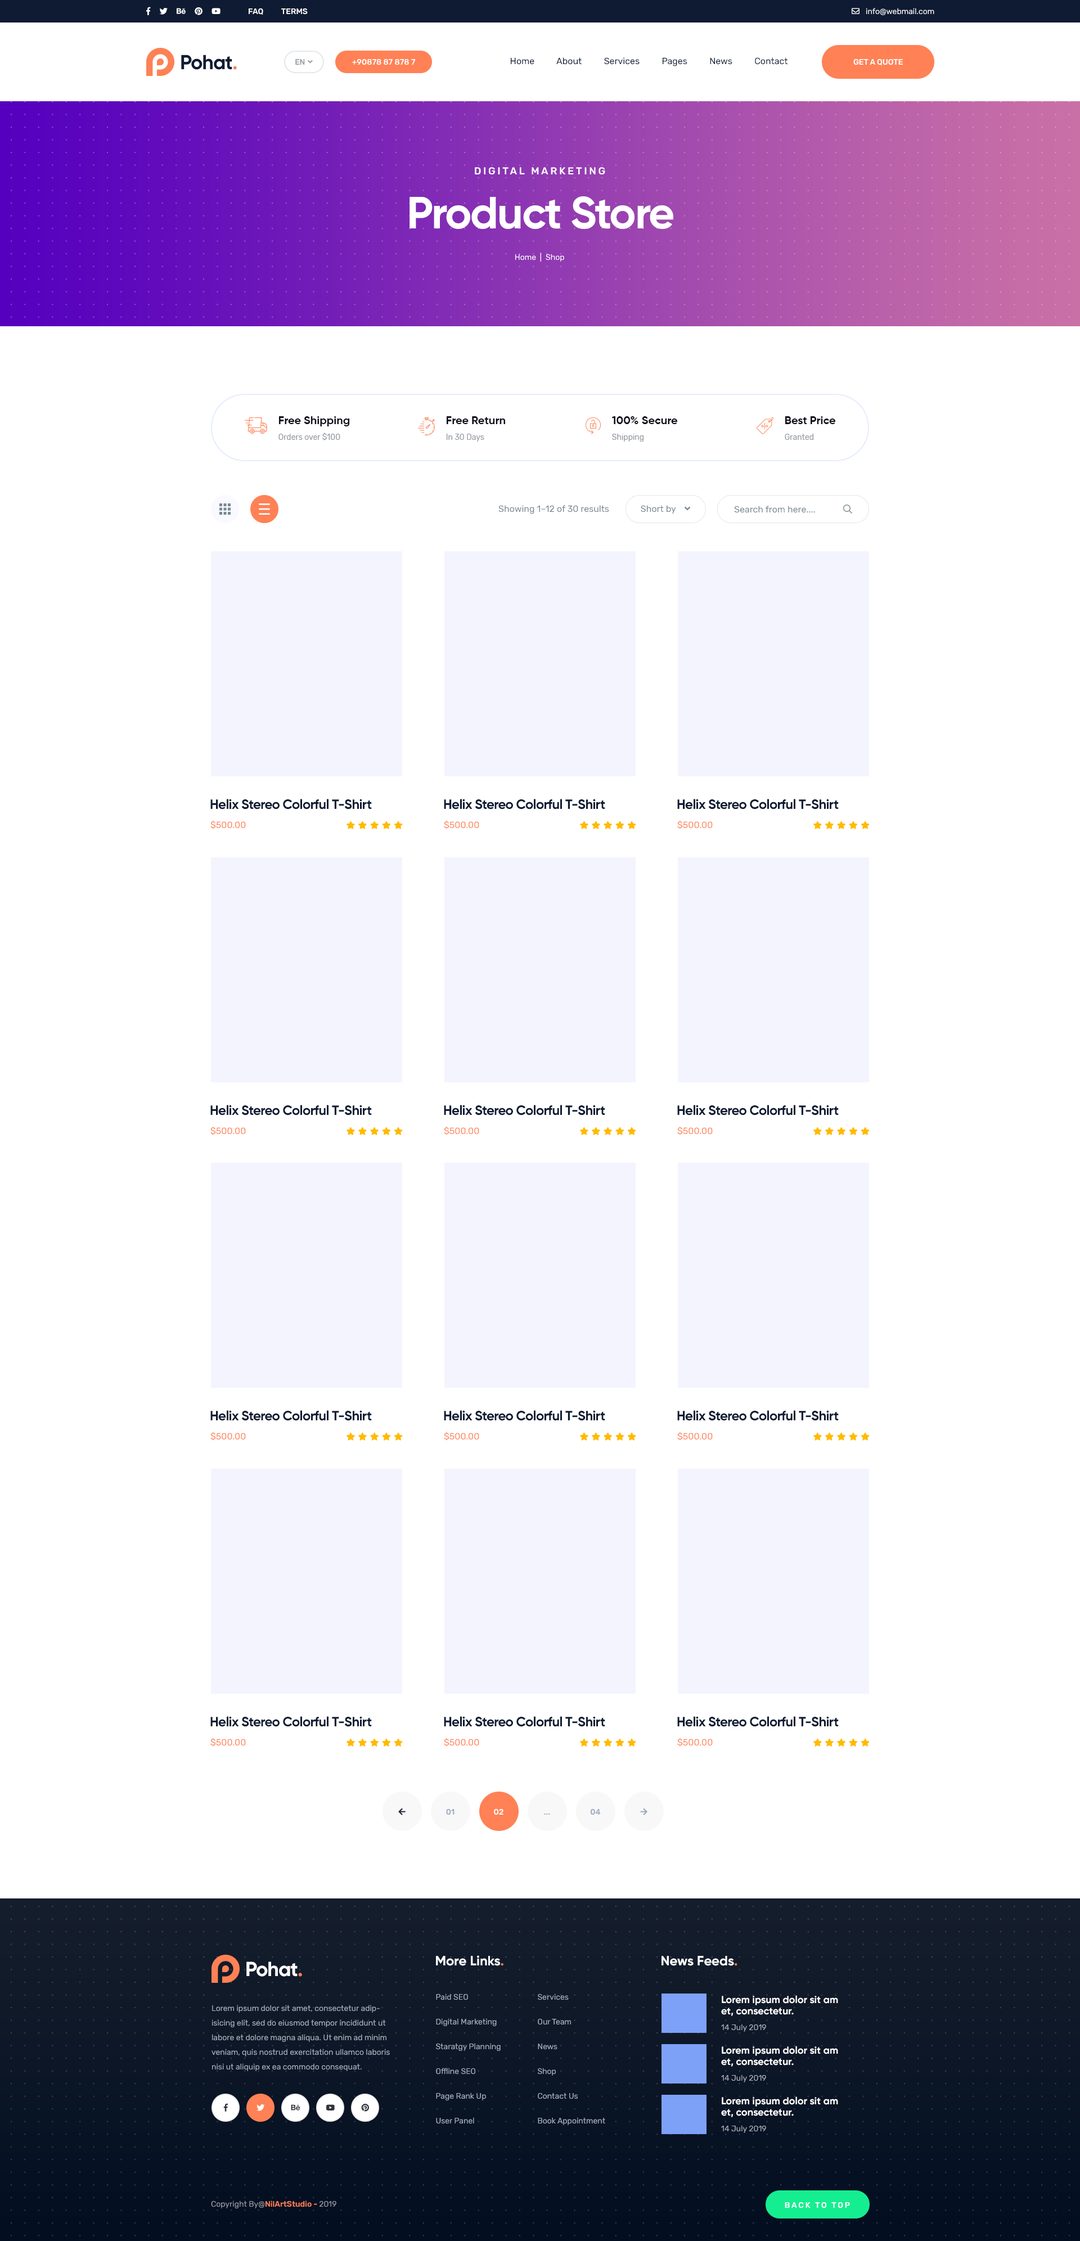
<style>
.page{position:relative;width:1080px;height:2241px;background:#ffffff}
.page>*{position:absolute;margin:0}
.t1{font:7.9px "Rubik-Medium";color:#ffffff;text-transform:uppercase}
.t2{font:7.9px "Rubik-Regular";color:#ffffff}
.t3{font:7.9px "FontAwesome5Pro-Regular";color:#ffffff}
.t4{font:20.2px "Gilroy-Bold";letter-spacing:-0.03em;color:#0e1b33}
.t5{font:20.2px "Gilroy-Bold";letter-spacing:-0.03em;color:#ff8156}
.t6{font:7.9px "Rubik-Medium";color:#ffffff}
.t7{font:9px "Rubik-Regular";color:#0e1b33}
.t8{font:10.1px "Rubik-Medium";letter-spacing:0.2em;color:#ffffff;text-transform:uppercase}
.t9{font:45px "Gilroy-Bold";letter-spacing:-0.03em;color:#ffffff}
.t10{font:7.9px/15.8px "Rubik-Regular";color:#999ea5}
.t11{font:11.2px/15.8px "Gilroy-Bold";color:#100d1c}
.t12{font:9px "Rubik-Regular";color:#788892}
.t13{font:13.5px "Gilroy-Bold";letter-spacing:-0.03em;color:#0e1b33}
.t14{font:9px "Rubik-Regular";color:#ff8155}
.t15{font:7.9px "Rubik-Medium";color:#9fa7c5;text-transform:uppercase}
.t16{font:20.2px "Gilroy-Bold";letter-spacing:-0.03em;color:#ffffff}
.t17{font:13.5px "Gilroy-Bold";color:#ffffff}
.t18{font:13.5px "Gilroy-Bold";color:#ff8155}
.t19{font:7.9px/24.8px "Rubik-Regular";color:#a9b2c0}
.t20{font:10.1px/11.2px "Gilroy-Bold";color:#ffffff}
.t21{font:7.9px/14.6px "Rubik-Regular";color:#a9b2c0}
.t22{font:7.9px "Rubik-Regular";color:#a9b2c0}
.t23{font:7.9px "Rubik-Medium";color:#ff8155}
.t24{font:7.9px "Rubik-Regular";color:#999ea5}
.t25{font:7.9px "Rubik-Medium";letter-spacing:0.2em;color:#ffffff;text-transform:uppercase}
</style>
<div class="page">
<p class="t1" style="left:249px;top:8px;width:59px;height:7px">Faq          terms</p>
<p class="t2" style="left:852px;top:8px;width:82px;height:7px"><span class="t3">envelope  </span>info@webmail.com</p>
<p class="t4" style="left:181px;top:55px;width:56px;height:15px">Pohat<span class="t5">.</span></p>
<p class="t6" style="left:352px;top:58px;width:63px;height:7px">+90878 87 878 7</p>
<p class="t7" style="left:511px;top:57px;width:277px;height:9px">Home          About          Services          Pages          News          Contact</p>
<p class="t1" style="left:853px;top:58px;width:50px;height:7px">Get A Quote</p>
<p class="t8" style="left:475px;top:167px;width:130px;height:8px">digital marketing</p>
<p class="t9" style="left:410px;top:196px;width:263px;height:33px">Product Store</p>
<p class="t2" style="left:515px;top:253px;width:49px;height:9px">Home  |  Shop</p>
<p class="t10" style="left:278px;top:416px;width:72px;height:24px"><span class="t11">Free Shipping<br></span>Orders over $100</p>
<p class="t11" style="left:446px;top:416px;width:59px;height:26px">Free Return<br><span class="t10">In 30 Days</span></p>
<p class="t11" style="left:612px;top:416px;width:65px;height:26px">100% Secure<br><span class="t10">Shipping</span></p>
<p class="t11" style="left:785px;top:416px;width:50px;height:24px">Best Price<br><span class="t10">Granted</span></p>
<p class="t12" style="left:498px;top:505px;width:111px;height:9px">Showing 1–12 of 30 results</p>
<p class="t12" style="left:734px;top:506px;width:81px;height:7px">Search from here....</p>
<p class="t13" style="left:210px;top:799px;width:162px;height:10px">Helix Stereo Colorful T-Shirt</p>
<p class="t13" style="left:444px;top:799px;width:161px;height:10px">Helix Stereo Colorful T-Shirt</p>
<p class="t13" style="left:677px;top:799px;width:162px;height:10px">Helix Stereo Colorful T-Shirt</p>
<p class="t14" style="left:210px;top:821px;width:36px;height:8px">$500.00</p>
<p class="t14" style="left:444px;top:821px;width:35px;height:8px">$500.00</p>
<p class="t14" style="left:677px;top:821px;width:36px;height:8px">$500.00</p>
<p class="t13" style="left:210px;top:1105px;width:162px;height:10px">Helix Stereo Colorful T-Shirt</p>
<p class="t13" style="left:444px;top:1105px;width:161px;height:10px">Helix Stereo Colorful T-Shirt</p>
<p class="t13" style="left:677px;top:1105px;width:162px;height:10px">Helix Stereo Colorful T-Shirt</p>
<p class="t14" style="left:210px;top:1127px;width:36px;height:8px">$500.00</p>
<p class="t14" style="left:444px;top:1127px;width:35px;height:8px">$500.00</p>
<p class="t14" style="left:677px;top:1127px;width:36px;height:8px">$500.00</p>
<p class="t13" style="left:210px;top:1410px;width:162px;height:11px">Helix Stereo Colorful T-Shirt</p>
<p class="t13" style="left:444px;top:1410px;width:161px;height:11px">Helix Stereo Colorful T-Shirt</p>
<p class="t13" style="left:677px;top:1410px;width:162px;height:11px">Helix Stereo Colorful T-Shirt</p>
<p class="t14" style="left:210px;top:1432px;width:36px;height:9px">$500.00</p>
<p class="t14" style="left:444px;top:1432px;width:35px;height:9px">$500.00</p>
<p class="t14" style="left:677px;top:1432px;width:36px;height:9px">$500.00</p>
<p class="t13" style="left:210px;top:1716px;width:162px;height:11px">Helix Stereo Colorful T-Shirt</p>
<p class="t13" style="left:444px;top:1716px;width:161px;height:11px">Helix Stereo Colorful T-Shirt</p>
<p class="t13" style="left:677px;top:1716px;width:162px;height:11px">Helix Stereo Colorful T-Shirt</p>
<p class="t14" style="left:210px;top:1738px;width:36px;height:9px">$500.00</p>
<p class="t14" style="left:444px;top:1738px;width:35px;height:9px">$500.00</p>
<p class="t14" style="left:677px;top:1738px;width:36px;height:9px">$500.00</p>
<p class="t15" style="left:446px;top:1808px;width:8px;height:7px">01</p>
<p class="t1" style="left:494px;top:1808px;width:9px;height:7px">02</p>
<p class="t15" style="left:544px;top:1814px;width:6px;height:1px">...</p>
<p class="t15" style="left:591px;top:1808px;width:10px;height:7px">04</p>
<p class="t16" style="left:246px;top:1961px;width:56px;height:16px">Pohat<span class="t5">.</span></p>
<p class="t17" style="left:436px;top:1955px;width:67px;height:11px">More Links<span class="t18">.</span></p>
<p class="t17" style="left:662px;top:1956px;width:75px;height:10px">News Feeds<span class="t18">.</span></p>
<p class="t19" style="left:436px;top:1994px;width:65px;height:130px">Paid SEO<br>Digital Marketing<br>Staratgy Planning<br>Offline SEO<br>Page Rank Up<br>User Panel</p>
<p class="t19" style="left:538px;top:1994px;width:67px;height:131px">Services<br>Our Team<br>News<br>Shop<br>Contact Us<br>Book Appointment</p>
<p class="t20" style="left:721px;top:1995px;width:117px;height:21px">Lorem ipsum dolor sit am<br>et, consectetur.</p>
<p class="t21" style="left:212px;top:2005px;width:178px;height:66px">Lorem ipsum dolor sit amet, consectetur adipisicing elit, sed do eiusmod tempor incididunt ut labore et dolore magna aliqua. Ut enim ad minim veniam, quis nostrud exercitation ullamco laboris nisi ut aliquip ex ea commodo consequat.</p>
<p class="t22" style="left:721px;top:2024px;width:45px;height:8px">14 July 2019</p>
<p class="t20" style="left:721px;top:2046px;width:117px;height:21px">Lorem ipsum dolor sit am<br>et, consectetur.</p>
<p class="t22" style="left:721px;top:2074px;width:45px;height:8px">14 July 2019</p>
<p class="t20" style="left:721px;top:2096px;width:117px;height:21px">Lorem ipsum dolor sit am<br>et, consectetur.</p>
<p class="t22" style="left:721px;top:2125px;width:45px;height:8px">14 July 2019</p>
<p class="t23" style="left:211px;top:2200px;width:125px;height:8px"><span class="t24">Copyright By@</span>NilArtStudio - <span class="t24">2019</span></p>
<p class="t25" style="left:785px;top:2202px;width:65px;height:6px">bACK TO TOP</p>
</div>
